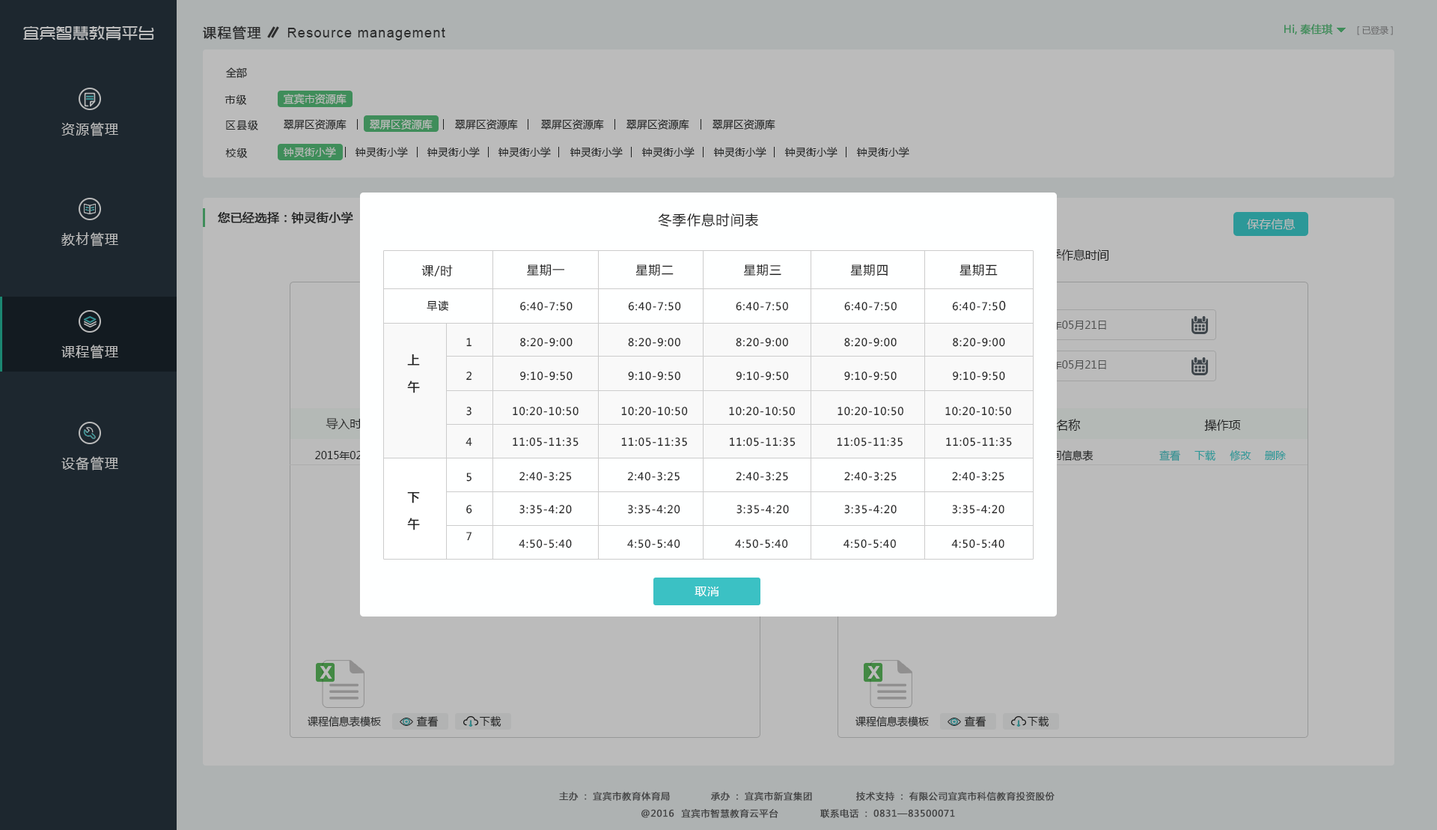
<style>
.page{position:relative;width:1437px;height:830px;background:#bbbbbb}
.page>*{position:absolute;margin:0}
.t1{font:16.5px "TRENDS";color:#bbbbbb}
.t2{font:13.5px "MicrosoftYaHei";letter-spacing:0.075em;color:#333333;font-weight:bold}
.t3{font:13.5px "ArialMT";letter-spacing:0.075em;color:#333333}
.t4{font:10.5px "MicrosoftYaHei";color:#3f8d5a;font-weight:bold}
.t5{font:9px "MicrosoftYaHei";letter-spacing:-0.01em;color:#666767}
.t6{font:10.5px "MicrosoftYaHei";color:#222222}
.t7{font:10.5px "MicrosoftYaHei";letter-spacing:0.075em;color:#222222}
.t8{font:10.5px "MicrosoftYaHei";color:#bbbbbb}
.t9{font:13.5px "MicrosoftYaHei";letter-spacing:0.075em;color:#bbbbbb}
.t10{font:12px "MicrosoftYaHei";color:#222222;font-weight:bold}
.t11{font:13.5px "MicrosoftYaHei";letter-spacing:0.075em;color:#222222}
.t12{font:12px "MicrosoftYaHei";color:#bbbbbb}
.t13{font:12px "MicrosoftYaHei";color:#222222}
.t14{font:12px "MicrosoftYaHei";letter-spacing:0.075em;color:#222222}
.t15{font:10.5px "MicrosoftYaHei";color:#666666}
.t16{font:12px/27px "MicrosoftYaHei";letter-spacing:0.075em;color:#222222;font-weight:bold}
.t17{font:12px "MicrosoftYaHei"}
.t18{font:10.5px "MicrosoftYaHei"}
.t19{font:10.5px "MicrosoftYaHei";color:#329193}
.t20{font:10.5px "MicrosoftYaHei";color:#2c9898}
.t21{font:12px "MicrosoftYaHei";letter-spacing:0.05em;color:#ffffff}
.t22{font:10.5px "MicrosoftYaHei";color:#333333}
.t23{font:10.5px "MicrosoftYaHei";letter-spacing:0.05em;color:#222222}
.t24{font:9px "MicrosoftYaHei";letter-spacing:0.05em;color:#545454;font-weight:bold}
</style>
<div class="page">
<p class="t1" style="left:23px;top:25px;width:131px;height:15px">宜宾智慧教育平台</p>
<p class="t2" style="left:203px;top:25px;width:58px;height:15px">课程管理</p>
<p class="t3" style="left:287px;top:28px;width:158px;height:12px">Resource management</p>
<p class="t4" style="left:1285px;top:24px;width:48px;height:10px">Hi,秦佳琪</p>
<p class="t5" style="left:1357px;top:25px;width:36px;height:10px">[已登录]</p>
<p class="t6" style="left:226px;top:67px;width:21px;height:11px">全部</p>
<p class="t7" style="left:225px;top:94px;width:22px;height:11px">市级</p>
<p class="t8" style="left:283px;top:94px;width:64px;height:11px">宜宾市资源库</p>
<p class="t9" style="left:61px;top:122px;width:57px;height:14px">资源管理</p>
<p class="t7" style="left:226px;top:120px;width:32px;height:10px">区县级</p>
<p class="t6" style="left:284px;top:119px;width:63px;height:11px">翠屏区资源库</p>
<p class="t8" style="left:370px;top:119px;width:63px;height:11px">翠屏区资源库</p>
<p class="t6" style="left:455px;top:119px;width:63px;height:11px">翠屏区资源库</p>
<p class="t6" style="left:541px;top:119px;width:63px;height:11px">翠屏区资源库</p>
<p class="t6" style="left:627px;top:119px;width:63px;height:11px">翠屏区资源库</p>
<p class="t6" style="left:713px;top:119px;width:63px;height:11px">翠屏区资源库</p>
<p class="t7" style="left:225px;top:147px;width:23px;height:11px">校级</p>
<p class="t8" style="left:283px;top:147px;width:53px;height:10px">钟灵街小学</p>
<p class="t6" style="left:355px;top:147px;width:53px;height:10px">钟灵街小学</p>
<p class="t6" style="left:427px;top:147px;width:53px;height:10px">钟灵街小学</p>
<p class="t6" style="left:498px;top:147px;width:53px;height:10px">钟灵街小学</p>
<p class="t6" style="left:570px;top:147px;width:53px;height:10px">钟灵街小学</p>
<p class="t6" style="left:642px;top:147px;width:53px;height:10px">钟灵街小学</p>
<p class="t6" style="left:713px;top:147px;width:54px;height:10px">钟灵街小学</p>
<p class="t6" style="left:785px;top:147px;width:53px;height:10px">钟灵街小学</p>
<p class="t6" style="left:856px;top:147px;width:54px;height:10px">钟灵街小学</p>
<p class="t10" style="left:218px;top:211px;width:135px;height:13px">您已经选择：钟灵街小学</p>
<p class="t11" style="left:658px;top:213px;width:100px;height:14px">冬季作息时间表</p>
<p class="t12" style="left:1247px;top:218px;width:49px;height:12px">保存信息</p>
<p class="t9" style="left:61px;top:232px;width:57px;height:14px">教材管理</p>
<p class="t13" style="left:1038px;top:249px;width:72px;height:12px">夏季作息时间</p>
<p class="t14" style="left:422px;top:264px;width:31px;height:13px">课/时</p>
<p class="t14" style="left:527px;top:264px;width:38px;height:12px">星期一</p>
<p class="t14" style="left:636px;top:264px;width:38px;height:12px">星期二</p>
<p class="t14" style="left:744px;top:264px;width:38px;height:12px">星期三</p>
<p class="t14" style="left:851px;top:264px;width:37px;height:12px">星期四</p>
<p class="t14" style="left:960px;top:264px;width:38px;height:12px">星期五</p>
<p class="t7" style="left:427px;top:300px;width:21px;height:11px">早读</p>
<p class="t7" style="left:520px;top:302px;width:53px;height:9px">6:40-7:50</p>
<p class="t7" style="left:628px;top:302px;width:53px;height:9px">6:40-7:50</p>
<p class="t7" style="left:736px;top:302px;width:52px;height:9px">6:40-7:50</p>
<p class="t7" style="left:845px;top:302px;width:52px;height:9px">6:40-7:50</p>
<p class="t7" style="left:952px;top:300px;width:54px;height:11px">6:40-7:5<span class="t14">0</span></p>
<p class="t15" style="left:1027px;top:320px;width:80px;height:9px">2015年05月21日</p>
<p class="t7" style="left:466px;top:338px;width:6px;height:9px">1</p>
<p class="t7" style="left:520px;top:338px;width:53px;height:9px">8:20-9:00</p>
<p class="t7" style="left:628px;top:338px;width:53px;height:9px">8:20-9:00</p>
<p class="t7" style="left:736px;top:338px;width:52px;height:9px">8:20-9:00</p>
<p class="t7" style="left:845px;top:338px;width:52px;height:9px">8:20-9:00</p>
<p class="t7" style="left:953px;top:338px;width:52px;height:9px">8:20-9:00</p>
<p class="t9" style="left:61px;top:344px;width:57px;height:15px">课程管理</p>
<p class="t16" style="left:407px;top:353px;width:13px;height:40px;text-align:center">上<br>午</p>
<p class="t15" style="left:1027px;top:360px;width:80px;height:9px">2015年05月21日</p>
<p class="t7" style="left:466px;top:371px;width:6px;height:9px">2</p>
<p class="t7" style="left:520px;top:371px;width:53px;height:9px">9:10-9:50</p>
<p class="t7" style="left:628px;top:371px;width:53px;height:9px">9:10-9:50</p>
<p class="t7" style="left:736px;top:371px;width:53px;height:9px">9:10-9:50</p>
<p class="t7" style="left:845px;top:371px;width:52px;height:9px">9:10-9:50</p>
<p class="t7" style="left:953px;top:371px;width:52px;height:9px">9:10-9:50</p>
<p class="t7" style="left:466px;top:407px;width:6px;height:9px">3</p>
<p class="t7" style="left:513px;top:407px;width:66px;height:9px">10:20-10:50</p>
<p class="t7" style="left:621px;top:407px;width:67px;height:9px">10:20-10:50</p>
<p class="t7" style="left:729px;top:407px;width:66px;height:9px">10:20-10:50</p>
<p class="t7" style="left:838px;top:407px;width:66px;height:9px">10:20-10:50</p>
<p class="t7" style="left:946px;top:407px;width:65px;height:9px">10:20-10:50</p>
<p class="t17" style="left:326px;top:418px;width:48px;height:11px">导入时间</p>
<p class="t17" style="left:1032px;top:419px;width:49px;height:11px">信息名称</p>
<p class="t13" style="left:1205px;top:419px;width:36px;height:12px">操作项</p>
<p class="t7" style="left:466px;top:437px;width:6px;height:9px">4</p>
<p class="t7" style="left:513px;top:437px;width:66px;height:9px">11:05-11:35</p>
<p class="t7" style="left:621px;top:437px;width:66px;height:9px">11:05-11:35</p>
<p class="t7" style="left:730px;top:437px;width:66px;height:9px">11:05-11:35</p>
<p class="t7" style="left:837px;top:437px;width:66px;height:9px">11:05-11:35</p>
<p class="t7" style="left:946px;top:437px;width:66px;height:9px">11:05-11:35</p>
<p class="t18" style="left:1020px;top:450px;width:74px;height:11px">课程时间信息表</p>
<p class="t19" style="left:1160px;top:450px;width:21px;height:11px">查看</p>
<p class="t20" style="left:1195px;top:450px;width:21px;height:10px">下载</p>
<p class="t20" style="left:1230px;top:450px;width:22px;height:11px">修改</p>
<p class="t9" style="left:61px;top:456px;width:57px;height:14px">设备管理</p>
<p class="t18" style="left:315px;top:451px;width:80px;height:9px">2015年02月25日</p>
<p class="t20" style="left:1265px;top:451px;width:21px;height:9px">删除</p>
<p class="t7" style="left:466px;top:472px;width:6px;height:9px">5</p>
<p class="t7" style="left:520px;top:472px;width:52px;height:9px">2:40-3:25</p>
<p class="t7" style="left:627px;top:472px;width:53px;height:9px">2:40-3:25</p>
<p class="t7" style="left:736px;top:472px;width:52px;height:9px">2:40-3:25</p>
<p class="t7" style="left:845px;top:472px;width:52px;height:9px">2:40-3:25</p>
<p class="t7" style="left:952px;top:472px;width:53px;height:9px">2:40-3:25</p>
<p class="t16" style="left:407px;top:491px;width:13px;height:39px;text-align:center">下<br>午</p>
<p class="t7" style="left:466px;top:505px;width:6px;height:9px">6</p>
<p class="t7" style="left:520px;top:505px;width:52px;height:9px">3:35-4:20</p>
<p class="t7" style="left:628px;top:505px;width:53px;height:9px">3:35-4:20</p>
<p class="t7" style="left:737px;top:505px;width:52px;height:9px">3:35-4:20</p>
<p class="t7" style="left:845px;top:505px;width:52px;height:9px">3:35-4:20</p>
<p class="t7" style="left:952px;top:505px;width:53px;height:9px">3:35-4:20</p>
<p class="t7" style="left:466px;top:532px;width:6px;height:9px">7</p>
<p class="t7" style="left:519px;top:539px;width:53px;height:9px">4:50-5:40</p>
<p class="t7" style="left:627px;top:539px;width:54px;height:9px">4:50-5:40</p>
<p class="t7" style="left:735px;top:539px;width:53px;height:9px">4:50-5:40</p>
<p class="t7" style="left:843px;top:539px;width:53px;height:9px">4:50-5:40</p>
<p class="t7" style="left:952px;top:539px;width:53px;height:9px">4:50-5:40</p>
<p class="t21" style="left:695px;top:586px;width:24px;height:10px">取消</p>
<p class="t22" style="left:308px;top:716px;width:73px;height:11px">课程信息表模板</p>
<p class="t23" style="left:417px;top:716px;width:22px;height:11px">查看</p>
<p class="t23" style="left:480px;top:716px;width:22px;height:10px">下载</p>
<p class="t22" style="left:856px;top:716px;width:73px;height:11px">课程信息表模板</p>
<p class="t23" style="left:965px;top:716px;width:22px;height:11px">查看</p>
<p class="t23" style="left:1028px;top:716px;width:22px;height:10px">下载</p>
<p class="t24" style="left:559px;top:791px;width:111px;height:9px">主办：宜宾市教育体育局</p>
<p class="t24" style="left:711px;top:791px;width:101px;height:9px">承办：宜宾市新宜集团</p>
<p class="t24" style="left:856px;top:791px;width:199px;height:9px">技术支持：有限公司宜宾市科信教育投资股份</p>
<p class="t24" style="left:642px;top:809px;width:137px;height:9px">@2016  宜宾市智慧教育云平台</p>
<p class="t24" style="left:821px;top:809px;width:134px;height:9px">联系电话：0831—83500071</p>
</div>
